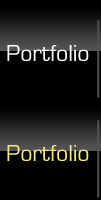
<style>
.page{position:relative;width:101px;height:200px;background:#000000}
.page>*{position:absolute;margin:0}
.t1{font:24px "EurostileRegular";color:#ffffff}
.t2{font:24px "EurostileRegular";color:#f8eb7a}
</style>
<div class="page">
<p class="t1" style="left:7px;top:45px;width:82px;height:16px">Portfolio</p>
<p class="t2" style="left:7px;top:145px;width:82px;height:16px">Portfolio</p>
</div>
